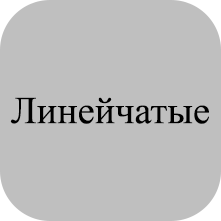
<style>
.page{position:relative;width:221px;height:221px;background:#bfbfbf}
.page>*{position:absolute;margin:0}
.t1{font:38.3px "TimesNewRomanPSMT";color:#000000}
</style>
<div class="page">
<p class="t1" style="left:10px;top:97px;width:199px;height:27px">Линейчатые</p>
</div>
